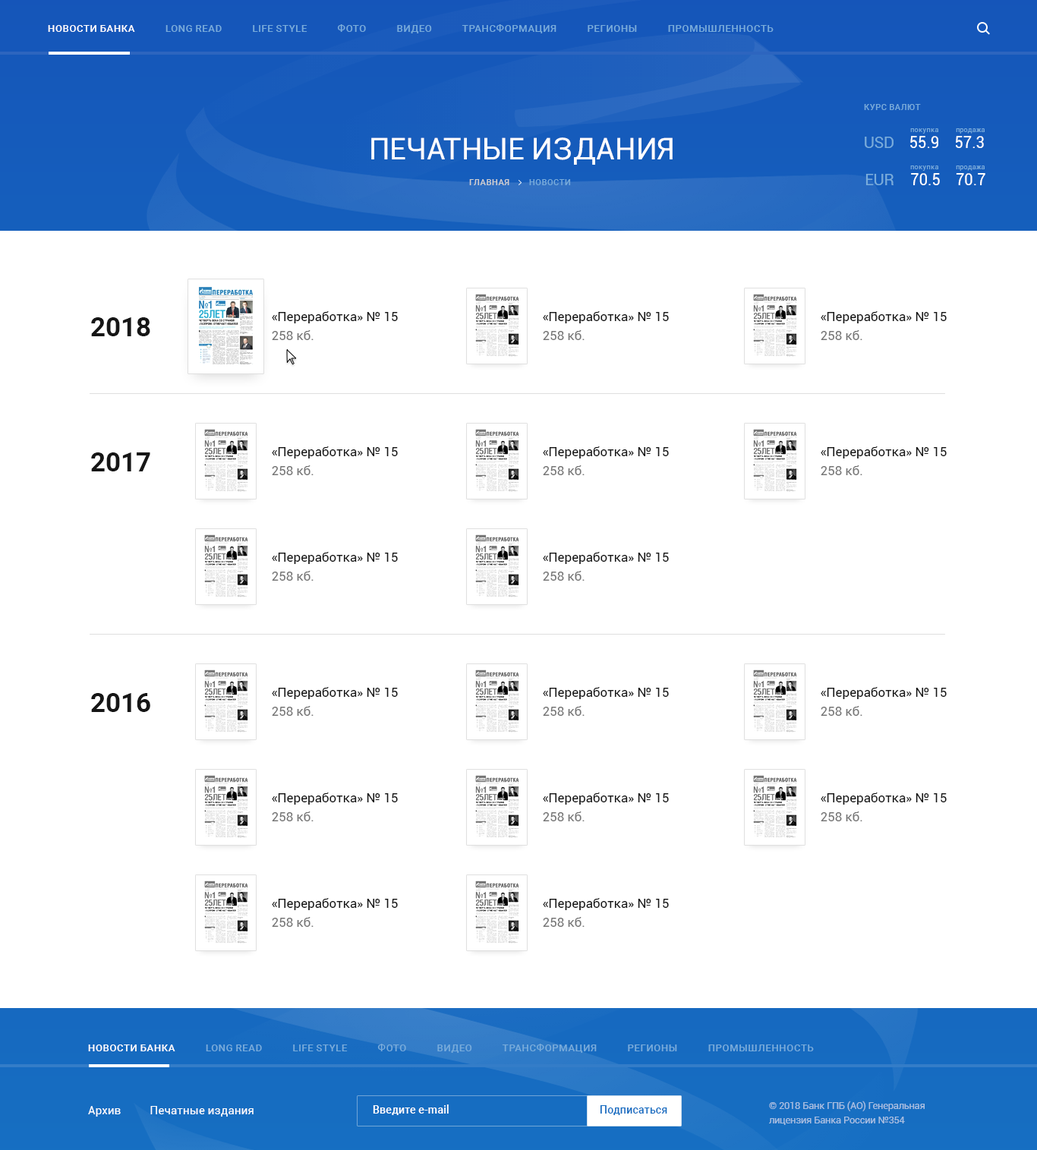
<style>
.page{position:relative;width:1037px;height:1150px;background:#ffffff}
.page>*{position:absolute;margin:0}
.t1{font:9.9px "Roboto-Medium";color:#78acdb;text-transform:uppercase}
.t2{font:9.9px "Roboto-Medium";color:#ffffff;text-transform:uppercase}
.t3{font:8.3px "Roboto-Medium";color:#78acdb;text-transform:uppercase}
.t4{font:30.2px "Roboto-Regular";color:#ffffff;text-transform:uppercase}
.t5{font:15.9px "Roboto-Regular";color:#78acdb}
.t6{font:15.9px "Roboto-Regular";color:#ffffff;scale:0.96 1}
.t7{font:6.8px "Roboto-Regular";color:#78acdb}
.t8{font:8.3px "Roboto-Medium";color:#d0d0d0;text-transform:uppercase}
.t9{font:26.6px "Roboto-Bold";color:#161616}
.t10{font:12.9px/19px "Roboto-Regular";color:#161616}
.t11{font:12.9px/19px "Roboto-Regular";color:#757575}
.t12{font:11.4px "Roboto-Regular";color:#ffffff}
.t13{font:11.4px "Roboto-Medium";color:#ffffff;scale:0.96 1}
.t14{font:11.4px "Roboto-Medium";color:#166ec2;scale:0.96 1}
.t15{font:9.9px/14.4px "Roboto-Regular";color:#a7bfe1;scale:0.96 1}
</style>
<div class="page">
<p class="t1" style="left:48px;top:24px;width:725px;height:9px"><span class="t2">Новости банка          </span>  Long Read            Life Style            Фото            Видео            Трансформация            Регионы            Промышленность</p>
<p class="t3" style="left:864px;top:104px;width:57px;height:6px">курс валют</p>
<p class="t4" style="left:371px;top:137px;width:302px;height:28px">Печатные издания</p>
<p class="t5" style="left:865px;top:137px;width:28px;height:11px">USD</p>
<p class="t6" style="left:910px;top:136px;width:74px;height:12px">55.9    57.3</p>
<p class="t7" style="left:910px;top:128px;width:28px;height:6px">покупка</p>
<p class="t7" style="left:956px;top:128px;width:29px;height:6px">продажа</p>
<p class="t5" style="left:865px;top:174px;width:28px;height:11px">EUR</p>
<p class="t7" style="left:910px;top:165px;width:28px;height:6px">покупка</p>
<p class="t6" style="left:911px;top:173px;width:74px;height:12px">70.5    70.7</p>
<p class="t7" style="left:956px;top:165px;width:29px;height:6px">продажа</p>
<p class="t8" style="left:469px;top:179px;width:102px;height:6px">Главная <span class="t3">        Новости</span></p>
<p class="t9" style="left:91px;top:317px;width:59px;height:19px">2018</p>
<p class="t10" style="left:272px;top:311px;width:126px;height:29px">«Переработка» № 15 <br><span class="t11">258 кб.</span></p>
<p class="t10" style="left:543px;top:311px;width:126px;height:29px">«Переработка» № 15 <br><span class="t11">258 кб.</span></p>
<p class="t10" style="left:821px;top:311px;width:126px;height:29px">«Переработка» № 15 <br><span class="t11">258 кб.</span></p>
<p class="t10" style="left:272px;top:446px;width:126px;height:29px">«Переработка» № 15 <br><span class="t11">258 кб.</span></p>
<p class="t10" style="left:543px;top:446px;width:126px;height:29px">«Переработка» № 15 <br><span class="t11">258 кб.</span></p>
<p class="t10" style="left:821px;top:446px;width:126px;height:29px">«Переработка» № 15 <br><span class="t11">258 кб.</span></p>
<p class="t9" style="left:91px;top:452px;width:59px;height:19px">2017</p>
<p class="t10" style="left:272px;top:552px;width:126px;height:29px">«Переработка» № 15 <br><span class="t11">258 кб.</span></p>
<p class="t10" style="left:543px;top:552px;width:126px;height:29px">«Переработка» № 15 <br><span class="t11">258 кб.</span></p>
<p class="t10" style="left:272px;top:687px;width:126px;height:29px">«Переработка» № 15 <br><span class="t11">258 кб.</span></p>
<p class="t10" style="left:543px;top:687px;width:126px;height:29px">«Переработка» № 15 <br><span class="t11">258 кб.</span></p>
<p class="t10" style="left:821px;top:687px;width:126px;height:29px">«Переработка» № 15 <br><span class="t11">258 кб.</span></p>
<p class="t9" style="left:91px;top:693px;width:59px;height:19px">2016</p>
<p class="t10" style="left:272px;top:792px;width:126px;height:29px">«Переработка» № 15 <br><span class="t11">258 кб.</span></p>
<p class="t10" style="left:543px;top:792px;width:126px;height:29px">«Переработка» № 15 <br><span class="t11">258 кб.</span></p>
<p class="t10" style="left:821px;top:792px;width:126px;height:29px">«Переработка» № 15 <br><span class="t11">258 кб.</span></p>
<p class="t10" style="left:272px;top:898px;width:126px;height:29px">«Переработка» № 15 <br><span class="t11">258 кб.</span></p>
<p class="t10" style="left:543px;top:898px;width:126px;height:29px">«Переработка» № 15 <br><span class="t11">258 кб.</span></p>
<p class="t1" style="left:88px;top:1044px;width:726px;height:9px"><span class="t2">Новости банка          </span>  Long Read            Life Style            Фото            Видео            Трансформация            Регионы            Промышленность</p>
<p class="t12" style="left:88px;top:1106px;width:166px;height:11px">Архив          Печатные издания</p>
<p class="t13" style="left:373px;top:1104px;width:76px;height:11px">Введите e-mail</p>
<p class="t14" style="left:600px;top:1105px;width:67px;height:10px">Подписаться</p>
<p class="t15" style="left:769px;top:1101px;width:156px;height:24px">© 2018 Банк ГПБ (АО) Генеральная<br>лицензия Банка России №354</p>
</div>
